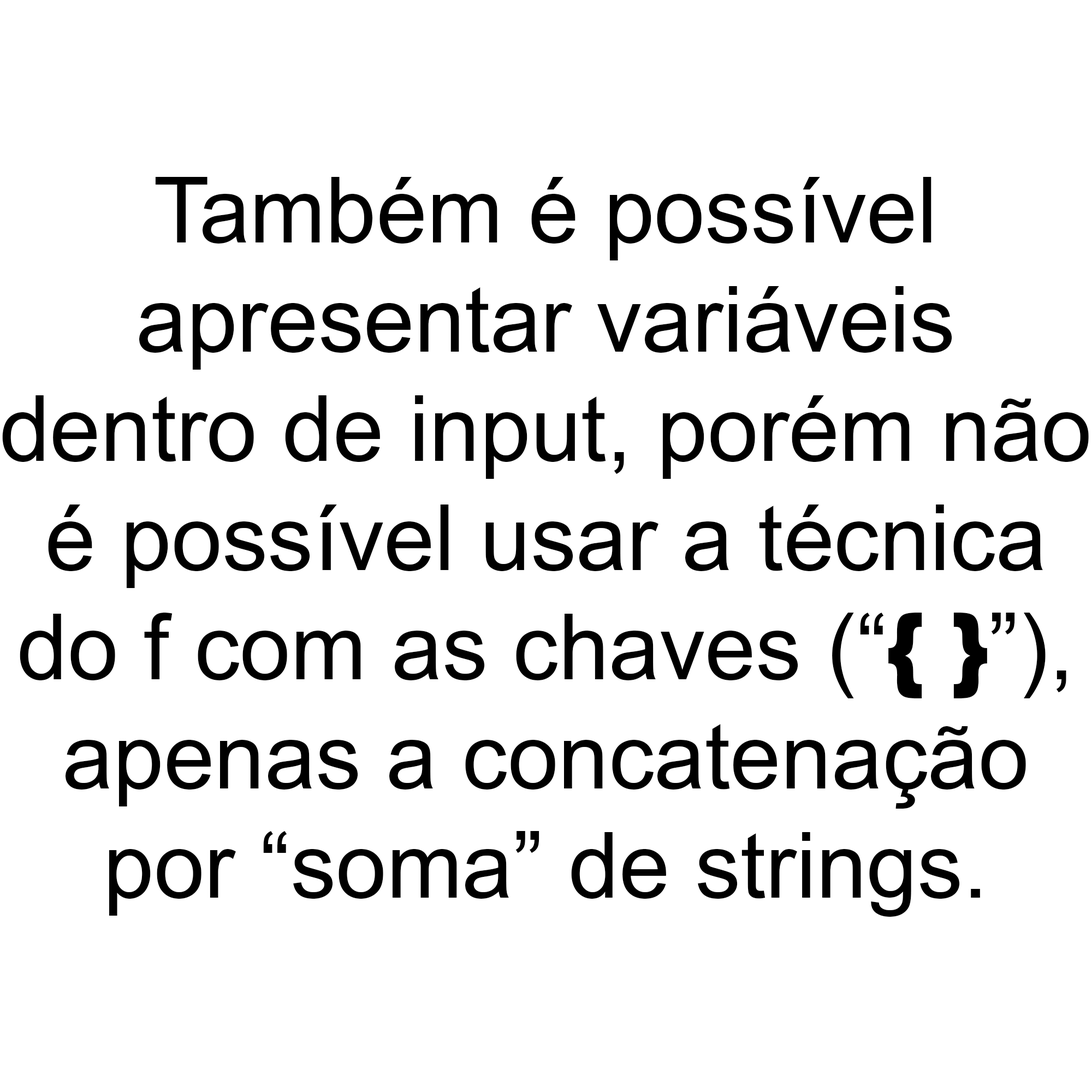
<style>
.page{position:relative;width:1092px;height:1092px;background:#ffffff}
.page>*{position:absolute;margin:0}
.t1{font:91px "ArialMT";color:#000000}
.t2{font:91px "Arial-Black";color:#000000}
</style>
<div class="page">
<p class="t1" style="left:2px;top:177px;width:1087px;height:740px;text-align:center">Também é possível<br>apresentar variáveis<br>dentro de input, porém não<br>é possível usar a técnica<br>do f com as chaves (“<span class="t2">{ }</span>”),<br>apenas a concatenação<br>por “soma” de strings.</p>
</div>
